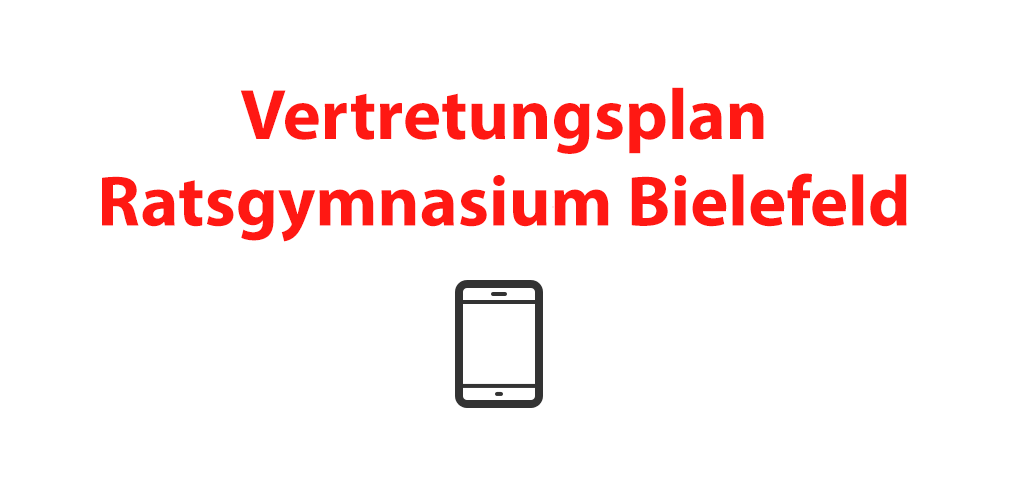
<style>
.page{position:relative;width:1024px;height:500px;background:#ffffff}
.page>*{position:absolute;margin:0}
.t1{font:72px "MyriadPro-Bold";color:#ff1813}
</style>
<div class="page">
<p class="t1" style="left:102px;top:87px;width:805px;height:155px;text-align:center">Vertretungsplan<br>Ratsgymnasium Bielefeld</p>
</div>
